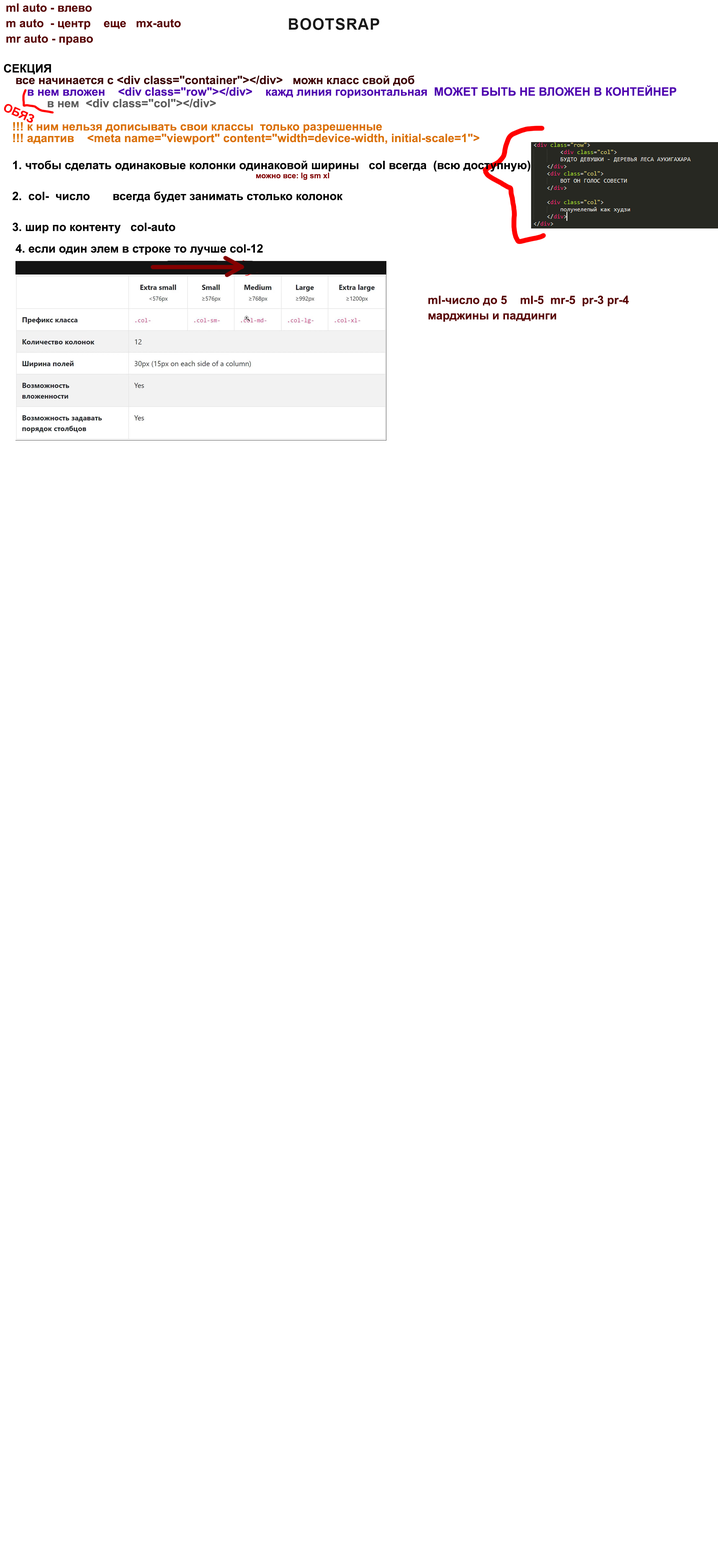
<style>
.page{position:relative;width:718px;height:1568px;background:#ffffff}
.page>*{position:absolute;margin:0}
.t1{font:11.6px/15.5px "Arial-BoldMT";color:#590000}
.t2{font:15.5px "Arial-BoldMT";letter-spacing:0.04em;color:#191919;text-transform:uppercase}
.t3{font:11.6px "Arial-BoldMT";color:#000000}
.t4{font:11.6px/15.5px "Arial-BoldMT";color:#000000}
.t5{font:11.6px/9px "Arial-BoldMT";color:#ff0000}
.t6{font:11.6px/11.6px "Arial-BoldMT";color:#3d0000}
.t7{font:11.6px/11.6px "Arial-BoldMT";color:#4f00b0}
.t8{font:11.6px/11.6px "Arial-BoldMT";color:#5d5d5d}
.t9{font:11.6px/11.6px "Arial-BoldMT";color:#db7100}
.t10{font:11.6px "Arial-BoldMT";color:#ff0000}
.t11{font:7.7px "Arial-BoldMT";color:#840000}
</style>
<div class="page">
<p class="t1" style="left:6px;top:3px;width:175px;height:42px">ml auto - влево<br>m auto  - центр    еще   mx-auto   <br>mr auto - право</p>
<p class="t2" style="left:289px;top:18px;width:90px;height:12px">bootsrap</p>
<p class="t3" style="left:4px;top:64px;width:47px;height:10px">СЕКЦИЯ</p>
<p class="t4" style="left:12px;top:75px;width:664px;height:159px"><span class="t5"><br></span><span class="t6"> все начинается с &lt;div class="container"&gt;&lt;/div&gt;   можн класс свой доб<br>  </span><span class="t7">в нем вложен    &lt;div class="row"&gt;&lt;/div&gt;    кажд линия горизонтальная  МОЖЕТ БЫТЬ НЕ ВЛОЖЕН В КОНТЕЙНЕР <br>   </span><span class="t8">в нем  &lt;div class="col"&gt;&lt;/div&gt;<br> <br></span><span class="t9">!!! к ним нельзя дописывать свои классы  только разрешенные<br>!!! адаптив    &lt;meta name="viewport" content="width=device-width, initial-scale=1"&gt;<br><br></span>1. чтобы сделать одинаковые колонки одинаковой ширины   col всегда  (всю доступную) <br>       <br>2.  col-  число       всегда будет занимать столько колонок <br><br>3. шир по контенту   col-auto</p>
<p class="t10" style="left:4px;top:104px;width:30px;height:19px;rotate:24deg">ОБЯЗ</p>
<p class="t11" style="left:256px;top:172px;width:73px;height:8px">можно все: lg sm xl</p>
<p class="t3" style="left:15px;top:244px;width:248px;height:11px">4. если один элем в строке то лучше col-12</p>
<p class="t1" style="left:428px;top:295px;width:201px;height:27px">ml-число до 5    ml-5  mr-5  pr-3 pr-4<br>марджины и паддинги</p>
</div>
